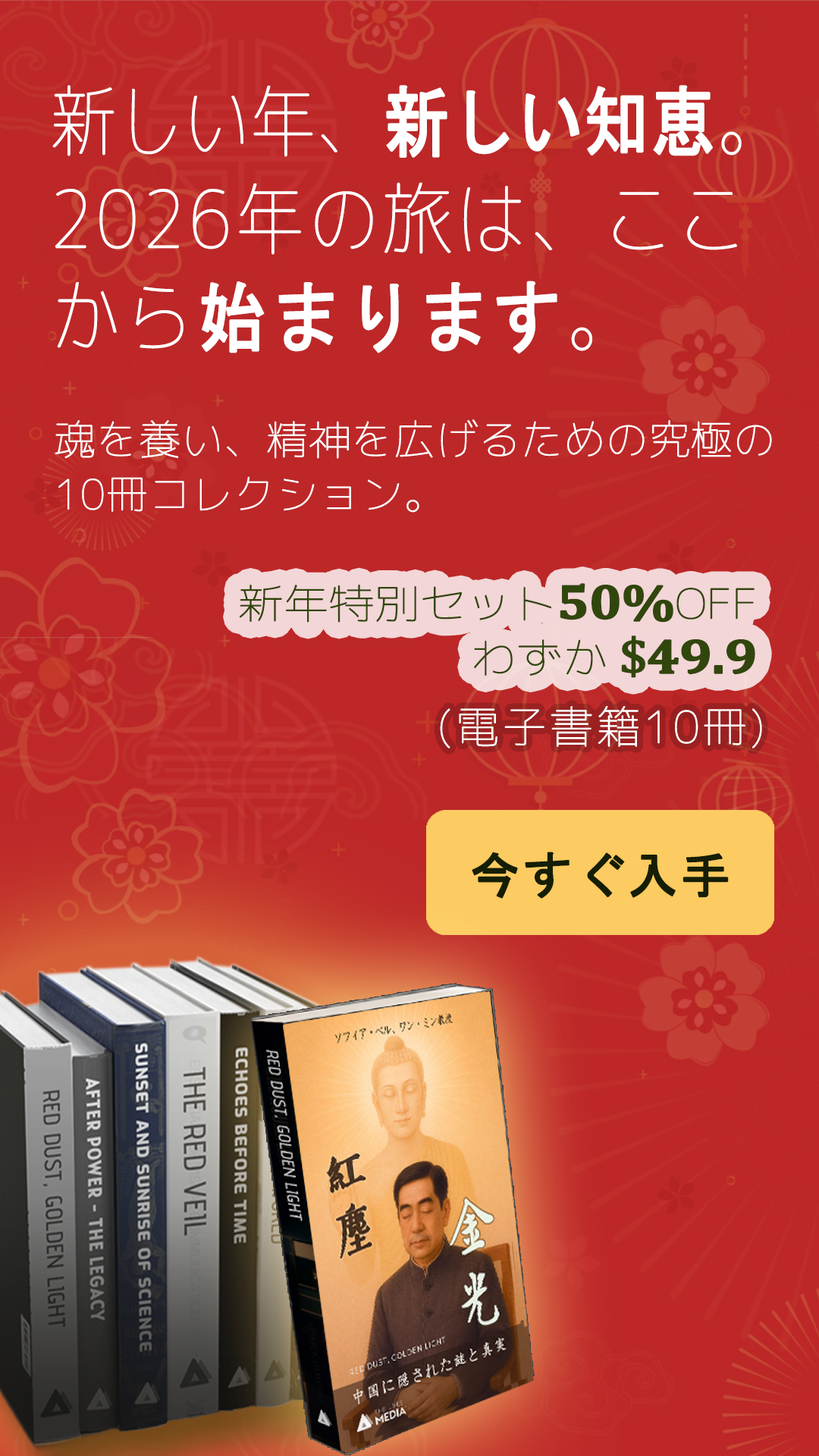
<style>
.page{position:relative;width:819px;height:1456px;background:#bd2728}
.page>*{position:absolute;margin:0}
.t1{font:78.3px/97.8px "Chogokuboso-Gothic";letter-spacing:0.05em;color:#ffffff;font-weight:bold;scale:0.88 1}
.t2{font:78.3px/97.8px "Chogokuboso-Gothic";letter-spacing:-0.005em;color:#ffffff;font-weight:bold;scale:0.83 1}
.t3{font:78.3px/97.8px "MS-Gothic";letter-spacing:-0.005em;color:#ffffff;font-weight:bold;scale:0.83 1}
.t4{font:78.3px/97.8px "MS-Gothic";letter-spacing:0.05em;color:#ffffff;font-weight:bold;scale:0.88 1}
.t5{font:40.9px/54.6px "Chogokuboso-Gothic";letter-spacing:0.01em;color:#ffffff;font-weight:bold}
.t6{font:40.9px/54.6px "Chogokuboso-Gothic";letter-spacing:-0.025em;color:#31460c;font-weight:bold;scale:1.11 1}
.t7{font:49.1px/54.6px "Cambria-Bold";letter-spacing:-0.025em;color:#31460c;font-weight:bold;scale:1.11 1}
.t8{font:49.1px/54.6px "Cambria";letter-spacing:-0.025em;color:#31460c;font-weight:bold;scale:1.11 1}
.t9{font:43.7px "Chogokuboso-Gothic";letter-spacing:0.05em;color:#ffffff;font-weight:bold}
.t10{font:50px "MS-Gothic";letter-spacing:0.025em;color:#151e05;font-weight:bold}
</style>
<div class="page">
<p class="t1" style="left:52px;top:85px;width:690px;height:269px"><span class="t2">新しい年、</span><span class="t3">新しい知恵</span><span class="t2">。</span>2026年の旅は、ここ<br>から<span class="t4">始まります</span>。</p>
<p class="t5" style="left:55px;top:419px;width:717px;height:94px">魂を養い、精神を広げるための究極の10冊コレクション。</p>
<p class="t6" style="left:240px;top:583px;width:515px;height:95px;text-align:right">新年特別セット<span class="t7">50%</span>OFF <br>わずか<span class="t8"> $</span><span class="t7">49.9</span></p>
<p class="t9" style="left:440px;top:706px;width:322px;height:42px">(電子書籍10冊)</p>
<p class="t10" style="left:472px;top:852px;width:257px;height:47px">今すぐ入手</p>
</div>
